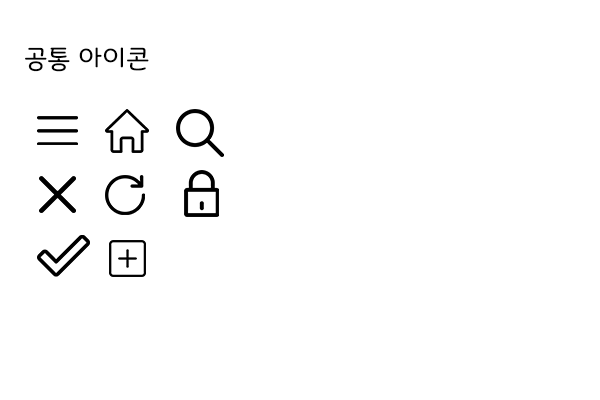
<style>
.page{position:relative;width:600px;height:400px;background:#ffffff}
.page>*{position:absolute;margin:0}
.t1{font:24px "Binggrae";color:#000000}
</style>
<div class="page">
<p class="t1" style="left:25px;top:47px;width:124px;height:25px">공통 아이콘</p>
</div>
